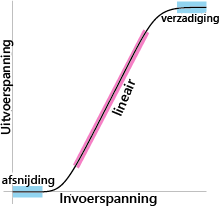
<style>
.page{position:relative;width:221px;height:206px;background:#ffffff}
.page>*{position:absolute;margin:0}
.t1{font:11px "SegoeUI-Semibold";color:#000000}
.t2{font:12.9px "SegoeUI-Semibold";color:#000000}
.t3{font:13.9px "SegoeUI-Semibold";color:#000000}
.t4{font:12px "SegoeUI-Semibold";color:#000000}
</style>
<div class="page">
<p class="t1" style="left:161px;top:14px;width:58px;height:10px">verzadiging</p>
<p class="t2" style="left:0px;top:40px;width:14px;height:95px;rotate:-90deg">Uitvoerspanning</p>
<p class="t3" style="left:111px;top:78px;width:24px;height:38px;rotate:-67deg">lineair</p>
<p class="t4" style="left:2px;top:175px;width:53px;height:12px">afsnijding</p>
<p class="t3" style="left:60px;top:193px;width:97px;height:13px">Invoerspanning</p>
</div>
